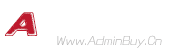
<style>
.page{position:relative;width:176px;height:52px;background:#ffffff}
.page>*{position:absolute;margin:0}
.t1{font:31.8px "FriedBread";letter-spacing:0.01em;color:#bd192d}
.t2{font:9.7px "MFLangQian_Noncommercial-Light";letter-spacing:0.01em;color:#b9b8b8;font-style:italic;scale:0.95 1}
</style>
<div class="page">
<p class="t1" style="left:5px;top:12px;width:33px;height:24px">A</p>
<p class="t2" style="left:57px;top:35px;width:105px;height:13px">Www.AdminBuy.Cn</p>
</div>
